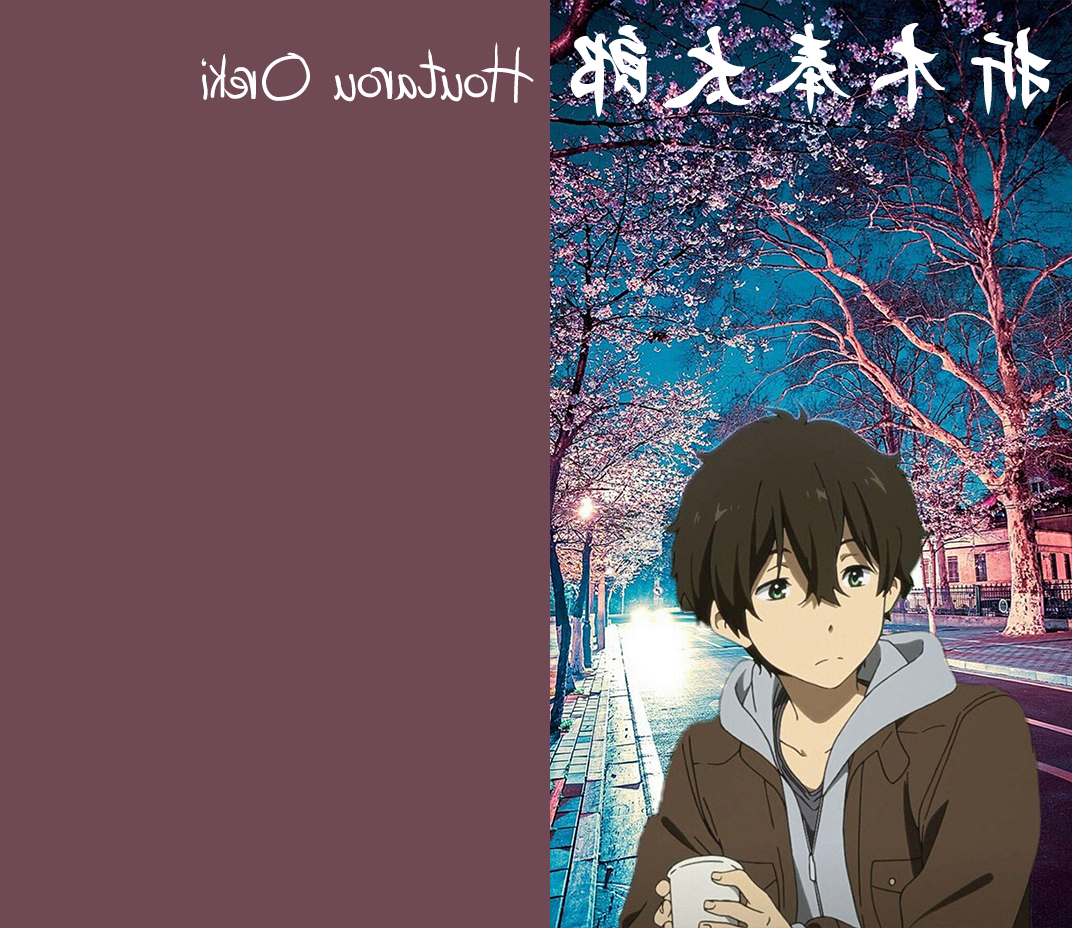
<style>
.page{position:relative;width:1072px;height:928px;background:#6f4953}
.page>*{position:absolute;margin:0}
.t1{font:100px "Hashtag";color:#ffffff}
.t2{font:100px "STXingkaiTC-Bold";color:#ffffff}
</style>
<div class="page">
<p class="t1" style="left:201px;top:23px;width:851px;height:94px;rotate:180deg"><span class="t2">折木奉太郎 </span>Houtarou Oreki</p>
</div>
